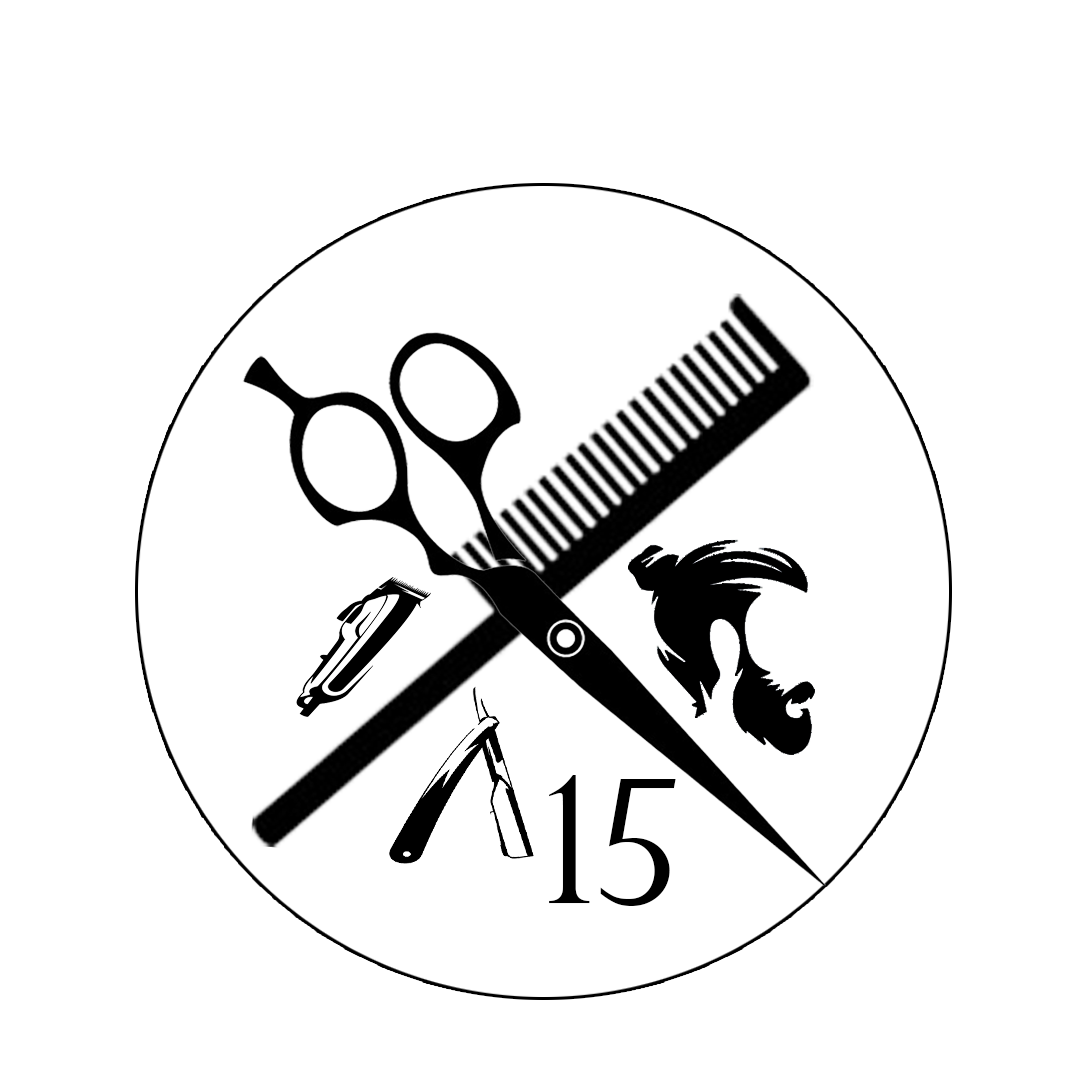
<style>
.page{position:relative;width:1080px;height:1080px;background:#ffffff}
.page>*{position:absolute;margin:0}
.t1{font:173px "PerpetuaTitlingMT-Light";color:#000000}
</style>
<div class="page">
<p class="t1" style="left:549px;top:775px;width:127px;height:131px">15</p>
</div>
